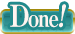
<style>
.page{position:relative;width:75px;height:34px;background:#218a8c}
.page>*{position:absolute;margin:0}
.t1{font:24px "RyuminPro-ExBold";letter-spacing:-0.08em;color:#fff5f0;scale:0.9 1}
.t2{font:30px "RyuminPro-ExBold";letter-spacing:-0.08em;color:#fff5f0;scale:0.9 1}
.t3{font:30px "RyuminPro-ExBold";letter-spacing:-0.08em;color:#fff5f0;font-style:italic;scale:0.9 1}
</style>
<div class="page">
<p class="t1" style="left:10px;top:4px;width:56px;height:24px"><span class="t2">D</span>one<span class="t3">!</span></p>
</div>
